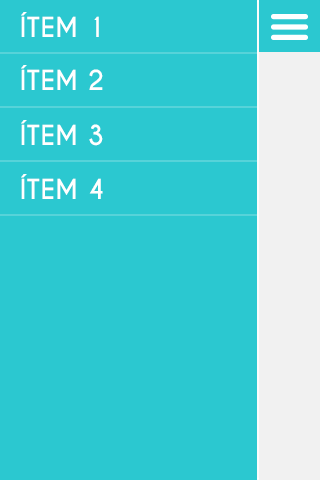
<style>
.page{position:relative;width:320px;height:480px;background:#2bc8d0}
.page>*{position:absolute;margin:0}
.t1{font:26px "CaviarDreams-Bold";letter-spacing:0.01em;color:#ffffff;text-transform:uppercase}
</style>
<div class="page">
<p class="t1" style="left:21px;top:12px;width:78px;height:25px">Ítem 1</p>
<p class="t1" style="left:21px;top:65px;width:82px;height:25px">Ítem 2</p>
<p class="t1" style="left:21px;top:120px;width:82px;height:26px">Ítem 3</p>
<p class="t1" style="left:21px;top:174px;width:82px;height:25px">Ítem 4</p>
</div>
